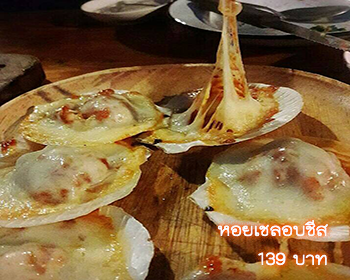
<style>
.page{position:relative;width:350px;height:280px}
.page>*{position:absolute;margin:0}
.t1{font:24px "THKodchasal";color:#ffffff}
</style>
<div class="page">
<p class="t1" style="left:217px;top:220px;width:111px;height:46px">หอยเชลอบชีส<br>บาท 139</p>
</div>
